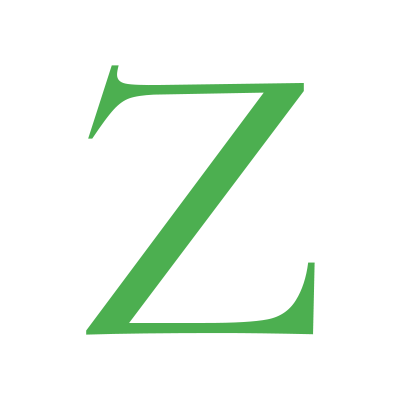
<style>
.page{position:relative;width:400px;height:400px;background:#ffffff}
.page>*{position:absolute;margin:0}
.t1{font:400px "STKaiti";color:#4caf50}
</style>
<div class="page">
<p class="t1" style="left:86px;top:65px;width:229px;height:270px">Z</p>
</div>
